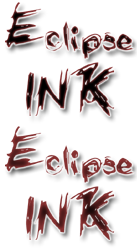
<style>
.page{position:relative;width:137px;height:248px;background:#ffffff}
.page>*{position:absolute;margin:0}
.t1{font:27.4px "Ringfinger"}
</style>
<div class="page">
<p class="t1" style="left:5px;top:2px;width:129px;height:114px;text-align:center">Eclipse<br><br>INK</p>
<p class="t1" style="left:5px;top:126px;width:129px;height:114px;text-align:center">Eclipse<br><br>INK</p>
</div>
